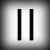
<style>
.page{position:relative;width:50px;height:50px}
.page>*{position:absolute;margin:0}
.t1{font:30px "HanWangWCL07";color:#080808}
</style>
<div class="page">
<p class="t1" style="left:17px;top:9px;width:15px;height:32px">||</p>
<p class="t1" style="left:18px;top:9px;width:15px;height:32px">||</p>
<p class="t1" style="left:19px;top:9px;width:15px;height:32px">||</p>
</div>
